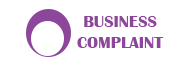
<style>
.page{position:relative;width:171px;height:62px;background:#ffffff}
.page>*{position:absolute;margin:0}
.t1{font:17.1px "BritannicBold";color:#8c479a}
</style>
<div class="page">
<p class="t1" style="left:77px;top:16px;width:87px;height:32px;text-align:center">BUSINESS<br>COMPLAINT</p>
</div>
